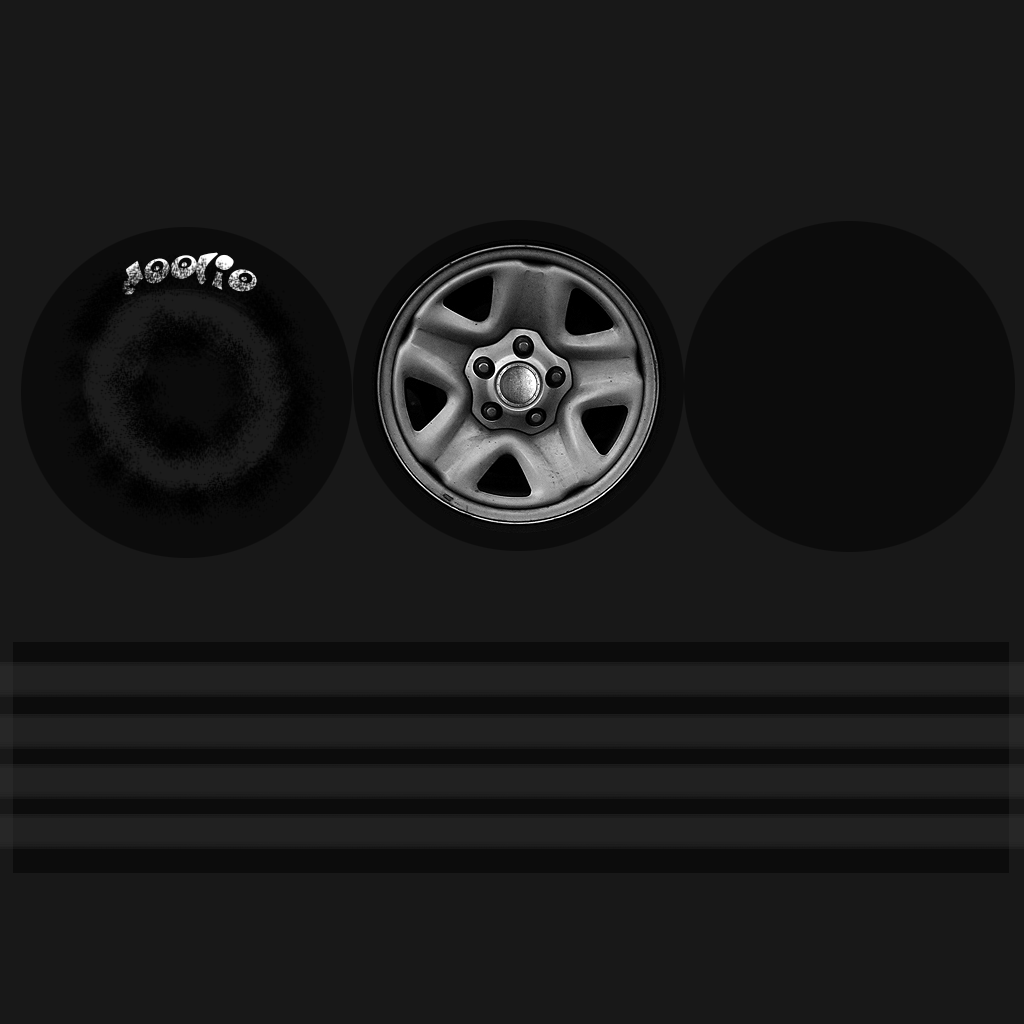
<style>
.page{position:relative;width:1024px;height:1024px;background:#181818}
.page>*{position:absolute;margin:0}
.t1{font:36px "Creamandsugar";font-variant:small-caps}
</style>
<div class="page">
<p class="t1" style="left:121px;top:252px;width:136px;height:43px">COOLIO</p>
</div>
